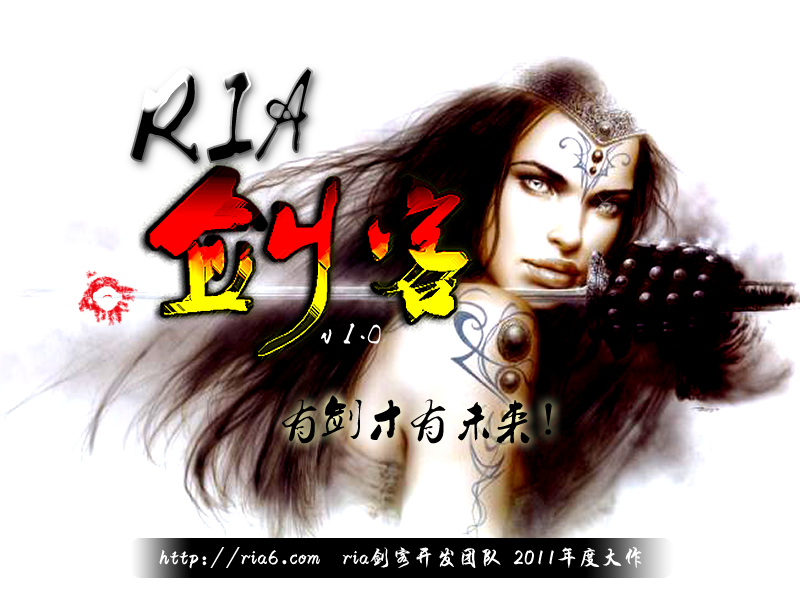
<style>
.page{position:relative;width:800px;height:600px;background:#ffffff}
.page>*{position:absolute;margin:0}
.t1{font:30.8px "Ò¶¸ùÓÑÐÐÊé·±";color:#ffffff}
.t2{font:43px "Ò¶¸ùÓÑÐÐÊé·±";color:#000000}
.t3{font:22px "HYi4gj";color:#ffffff}
</style>
<div class="page">
<p class="t1" style="left:321px;top:323px;width:60px;height:21px">v 1.0</p>
<p class="t2" style="left:282px;top:395px;width:270px;height:49px">有剑才有未来！</p>
<p class="t3" style="left:159px;top:546px;width:483px;height:23px">http://ria6.com  ria剑客开发团队 2011年度大作</p>
</div>
